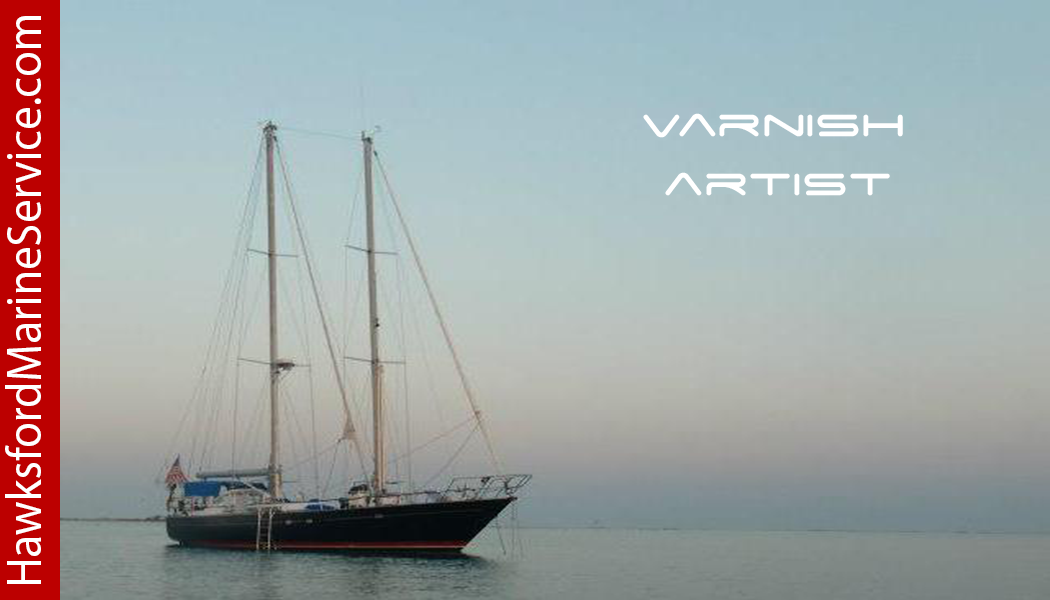
<style>
.page{position:relative;width:1050px;height:600px}
.page>*{position:absolute;margin:0}
.t1{font:11.9px "MyriadPro-Regular";color:#ffffff;scale:0.94 1}
.t2{font:11.9px "SpaceAge";color:#ffffff}
</style>
<div class="page">
<p class="t1" style="left:5px;top:16px;width:36px;height:568px;rotate:-90deg">HawksfordMarineService.com</p>
<p class="t2" style="left:643px;top:113px;width:260px;height:83px">Varnish<br> artist</p>
</div>
